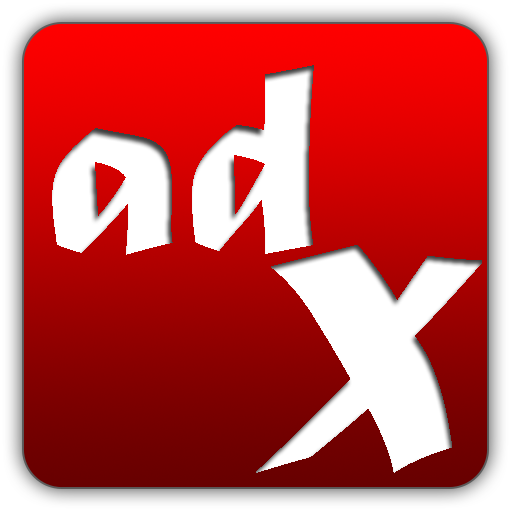
<style>
.page{position:relative;width:512px;height:512px}
.page>*{position:absolute;margin:0}
.t1{font:284.4px "MaturaMTScriptCapitals";color:#ffffff}
.t2{font:462.4px "MaturaMTScriptCapitals";color:#ffffff}
</style>
<div class="page">
<p class="t1" style="left:52px;top:65px;width:262px;height:190px">ad</p>
<p class="t2" style="left:256px;top:245px;width:226px;height:228px">x</p>
</div>
